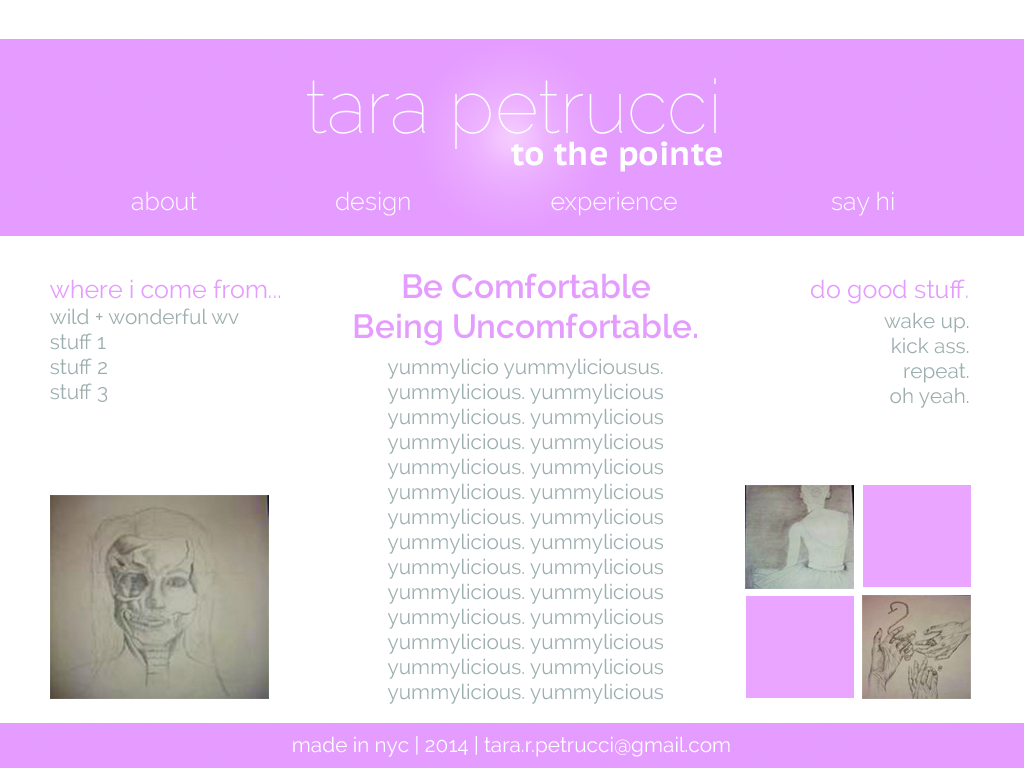
<style>
.page{position:relative;width:1024px;height:768px;background:#ffffff}
.page>*{position:absolute;margin:0}
.t1{font:75px "Raleway-Thin";color:#ffffff}
.t2{font:33.3px "PTSans-CaptionBold";color:#ffffff}
.t3{font:25px "Raleway-Light";color:#fffeff}
.t4{font:25px "Raleway";color:#e59cff}
.t5{font:33.3px "Raleway-SemiBold";color:#e59cff}
.t6{font:20.8px "Raleway";color:#9eaeaf}
.t7{font:20.8px "Raleway";color:#ffffff}
</style>
<div class="page">
<p class="t1" style="left:307px;top:78px;width:409px;height:71px">tara petrucci</p>
<p class="t2" style="left:511px;top:141px;width:211px;height:31px">to the pointe</p>
<p class="t3" style="left:131px;top:191px;width:67px;height:20px">about</p>
<p class="t3" style="left:336px;top:191px;width:74px;height:25px">design</p>
<p class="t3" style="left:551px;top:191px;width:126px;height:25px">experience</p>
<p class="t3" style="left:831px;top:191px;width:63px;height:25px">say hi</p>
<p class="t4" style="left:50px;top:279px;width:230px;height:20px">where i come from...</p>
<p class="t5" style="left:354px;top:273px;width:343px;height:73px;text-align:center">Be Comfortable<br>Being Uncomfortable.</p>
<p class="t4" style="left:811px;top:279px;width:157px;height:25px">do good stuff.</p>
<p class="t6" style="left:50px;top:308px;width:189px;height:94px">wild + wonderful wv<br>stuff 1<br>stuff 2<br>stuff 3</p>
<p class="t6" style="left:884px;top:312px;width:85px;height:96px;text-align:right">wake up.<br>kick ass.<br>repeat.<br>oh yeah.</p>
<p class="t6" style="left:387px;top:358px;width:276px;height:346px;text-align:center">yummylicio yummyliciousus.<br>yummylicious. yummylicious<br>yummylicious. yummylicious<br>yummylicious. yummylicious<br>yummylicious. yummylicious<br>yummylicious. yummylicious<br>yummylicious. yummylicious<br>yummylicious. yummylicious<br>yummylicious. yummylicious<br>yummylicious. yummylicious<br>yummylicious. yummylicious<br>yummylicious. yummylicious<br>yummylicious. yummylicious<br>yummylicious. yummylicious</p>
<p class="t7" style="left:293px;top:736px;width:437px;height:21px">made in nyc | 2014 | tara.r.petrucci@gmail.com</p>
</div>
